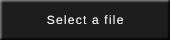
<style>
.page{position:relative;width:170px;height:40px;background:#1d1d1d}
.page>*{position:absolute;margin:0}
.t1{font:12px "LiberationSans";letter-spacing:0.1em;color:#ffffff}
</style>
<div class="page">
<p class="t1" style="left:47px;top:15px;width:76px;height:9px">Select a file</p>
</div>
